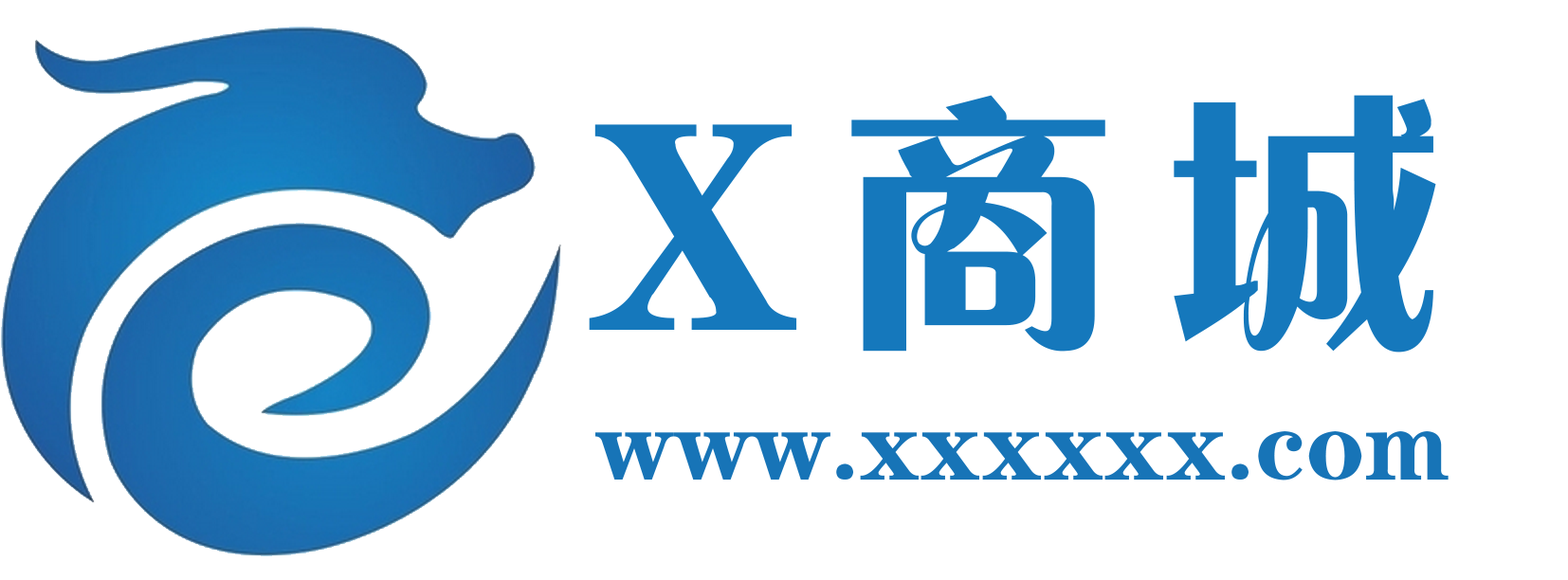
<style>
.page{position:relative;width:1568px;height:580px;background:#ffffff}
.page>*{position:absolute;margin:0}
.t1{font:298.2px "FZCHYJW--GB1-0";letter-spacing:0.1em;color:#1578bc}
.t2{font:100.6px "Jcusong";color:#1774b7}
</style>
<div class="page">
<p class="t1" style="left:589px;top:95px;width:847px;height:258px">X商城</p>
<p class="t2" style="left:595px;top:431px;width:854px;height:50px">www.xxxxxx.com</p>
</div>
